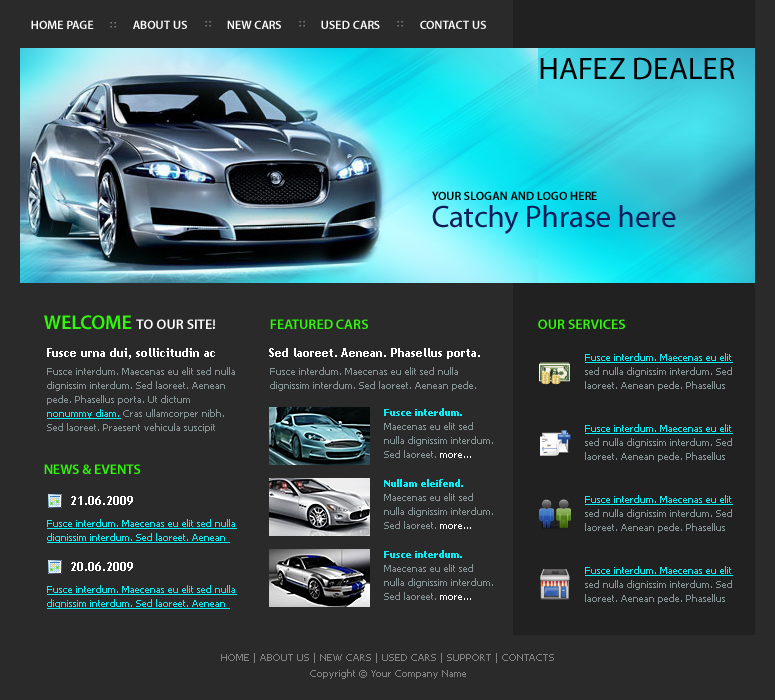
<style>
.page{position:relative;width:775px;height:700px;background:#2a2a2a}
.page>*{position:absolute;margin:0}
.t1{font:12px "MyriadPro-Semibold";color:#ffffff;text-transform:uppercase}
.t2{font:31px "MyriadPro-Regular";color:#000000}
.t3{font:12px "MyriadPro-Semibold";color:#000000;text-transform:uppercase}
.t4{font:31px "MyriadPro-Regular";color:#0c1d5b}
.t5{font:14px "MyriadPro-Semibold";color:#ffffff;text-transform:uppercase}
.t6{font:20px "MyriadPro-Semibold";color:#32f60b;text-transform:uppercase}
.t7{font:14px "MyriadPro-Semibold";color:#32f60b;text-transform:uppercase}
.t8{font:12px "TrebuchetMS-Bold";color:#ffffff}
.t9{font:10px/14px "Tahoma";color:#869496}
.t10{font:10px/14px "Tahoma";color:#0beef6;text-decoration:underline}
.t11{font:10px/14px "Tahoma-Bold";color:#0beef6}
.t12{font:10px/14px "Tahoma";color:#ffffff}
.t13{font:10px/16px "Tahoma";color:#848484}
</style>
<div class="page">
<p class="t1" style="left:31px;top:20px;width:63px;height:9px">HOME PAGE</p>
<p class="t1" style="left:133px;top:20px;width:54px;height:9px">ABOUT US</p>
<p class="t1" style="left:227px;top:20px;width:54px;height:9px">NEW CARS</p>
<p class="t1" style="left:321px;top:20px;width:59px;height:9px">USED CARS</p>
<p class="t1" style="left:420px;top:20px;width:66px;height:9px">CONTACT US</p>
<p class="t2" style="left:540px;top:57px;width:195px;height:23px">HAFEZ DEALER</p>
<p class="t3" style="left:432px;top:191px;width:165px;height:9px">your slogan and logo here</p>
<p class="t4" style="left:432px;top:205px;width:244px;height:29px">Catchy Phrase here</p>
<p class="t5" style="left:44px;top:315px;width:171px;height:15px"><span class="t6">WELCOME </span>TO OUR SITE!</p>
<p class="t7" style="left:270px;top:319px;width:98px;height:10px">FEATURED CARS</p>
<p class="t7" style="left:538px;top:319px;width:87px;height:10px">OUR SERVICES</p>
<p class="t8" style="left:47px;top:348px;width:168px;height:11px">Fusce urna dui, sollicitudin ac</p>
<p class="t8" style="left:269px;top:348px;width:211px;height:11px">Sed laoreet. Aenean. Phasellus porta.</p>
<p class="t9" style="left:585px;top:353px;width:148px;height:38px"><span class="t10">Fusce interdum. Maecenas eu elit </span>sed nulla dignissim interdum. Sed laoreet. Aenean pede. Phasellus</p>
<p class="t9" style="left:47px;top:367px;width:188px;height:66px">Fusce interdum. Maecenas eu elit sed nulla dignissim interdum. Sed laoreet. Aenean pede. Phasellus porta. Ut dictum <span class="t10">nonummy diam. </span>Cras ullamcorper nibh. Sed laoreet. Praesent vehicula suscipit</p>
<p class="t9" style="left:270px;top:367px;width:206px;height:24px">Fusce interdum. Maecenas eu elit sed nulla dignissim interdum. Sed laoreet. Aenean pede.</p>
<p class="t9" style="left:384px;top:408px;width:109px;height:50px"><span class="t11">Fusce interdum. </span>Maecenas eu elit sed nulla dignissim interdum. Sed laoreet. <span class="t12">more...</span></p>
<p class="t9" style="left:585px;top:424px;width:148px;height:38px"><span class="t10">Fusce interdum. Maecenas eu elit </span>sed nulla dignissim interdum. Sed laoreet. Aenean pede. Phasellus</p>
<p class="t7" style="left:44px;top:464px;width:97px;height:10px">NEWS &amp; EVENTS</p>
<p class="t9" style="left:384px;top:479px;width:109px;height:50px"><span class="t11">Nullam eleifend. </span>Maecenas eu elit sed nulla dignissim interdum. Sed laoreet. <span class="t12">more...</span></p>
<p class="t8" style="left:71px;top:496px;width:62px;height:9px">21.06.2009</p>
<p class="t9" style="left:585px;top:495px;width:148px;height:38px"><span class="t10">Fusce interdum. Maecenas eu elit </span>sed nulla dignissim interdum. Sed laoreet. Aenean pede. Phasellus</p>
<p class="t10" style="left:47px;top:519px;width:190px;height:24px">Fusce interdum. Maecenas eu elit sed nulla dignissim interdum. Sed laoreet. Aenean</p>
<p class="t9" style="left:384px;top:550px;width:109px;height:50px"><span class="t11">Fusce interdum. </span>Maecenas eu elit sed nulla dignissim interdum. Sed laoreet. <span class="t12">more...</span></p>
<p class="t8" style="left:71px;top:562px;width:62px;height:9px">20.06.2009</p>
<p class="t9" style="left:585px;top:566px;width:148px;height:38px"><span class="t10">Fusce interdum. Maecenas eu elit </span>sed nulla dignissim interdum. Sed laoreet. Aenean pede. Phasellus</p>
<p class="t10" style="left:47px;top:585px;width:190px;height:24px">Fusce interdum. Maecenas eu elit sed nulla dignissim interdum. Sed laoreet. Aenean</p>
<p class="t13" style="left:221px;top:653px;width:333px;height:26px;text-align:center">HOME | ABOUT US | NEW CARS | USED CARS | SUPPORT | CONTACTS<br>Copyright © Your Company Name</p>
</div>
